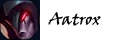
<style>
.page{position:relative;width:140px;height:40px;background:#ffffff}
.page>*{position:absolute;margin:0}
.t1{font:16px "VinerHandITC";color:#000000}
</style>
<div class="page">
<p class="t1" style="left:48px;top:12px;width:53px;height:14px">Aatrox</p>
</div>
